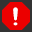
<style>
.page{position:relative;width:32px;height:32px;background:#ec0000}
.page>*{position:absolute;margin:0}
.t1{font:28px "CourierNewPS-BoldMT";color:#ffffff}
</style>
<div class="page">
<p class="t1" style="left:13px;top:7px;width:5px;height:19px">!</p>
</div>
